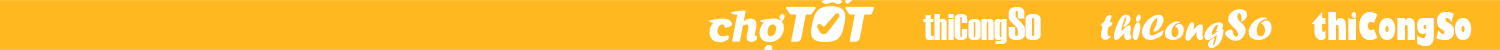
<style>
.page{position:relative;width:1500px;height:50px;background:#ffb820}
.page>*{position:absolute;margin:0}
.t1{font:37.5px "Haettenschweiler";color:#ffffff}
.t2{font:45.8px "Haettenschweiler";color:#ffffff}
.t3{font:37.5px "ForteMT";color:#ffffff}
.t4{font:45.8px "ForteMT";color:#ffffff}
.t5{font:37.5px "GillSans-UltraBoldCondensed";color:#ffffff}
</style>
<div class="page">
<p class="t1" style="left:923px;top:7px;width:118px;height:37px">thiCong<span class="t2">So</span></p>
<p class="t3" style="left:1101px;top:9px;width:171px;height:39px">thiCong<span class="t4">So</span></p>
<p class="t5" style="left:1311px;top:12px;width:161px;height:34px">thiCongSo</p>
</div>
